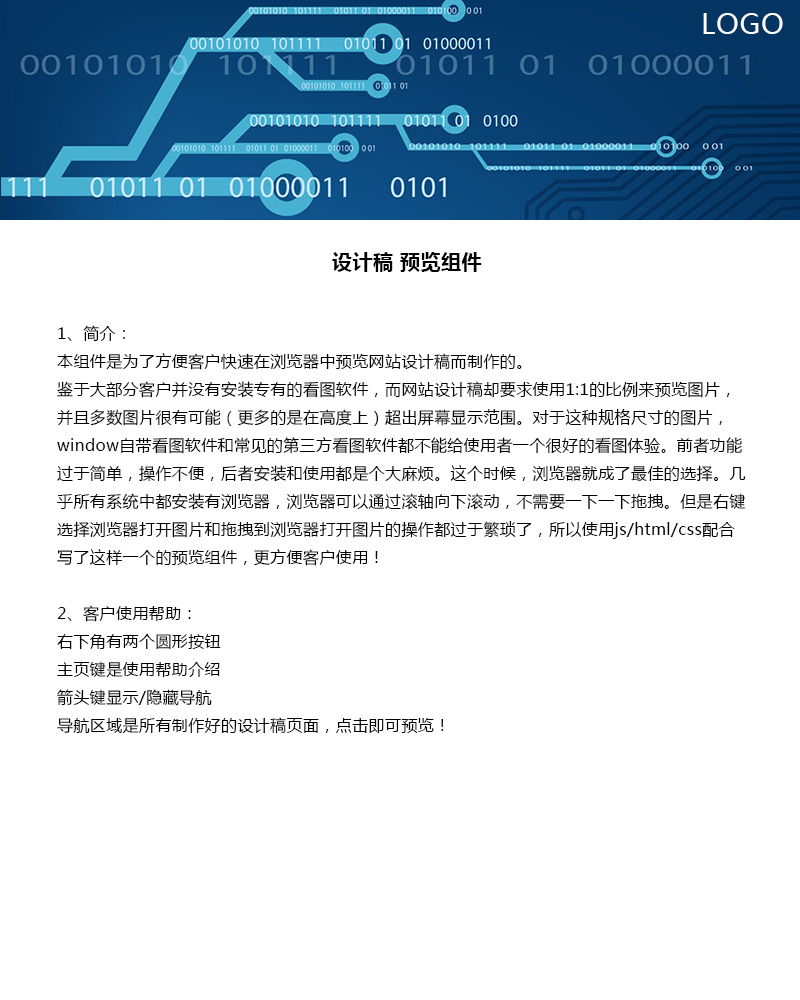
<style>
.page{position:relative;width:800px;height:1000px;background:#ffffff}
.page>*{position:absolute;margin:0}
.t1{font:28px "MicrosoftYaHei";letter-spacing:0.025em;color:#ffffff}
.t2{font:20px "MicrosoftYaHei-Bold";letter-spacing:0.025em;color:#000000}
.t3{font:16px "MicrosoftYaHei";letter-spacing:0.025em;color:#000000}
</style>
<div class="page">
<p class="t1" style="left:703px;top:13px;width:80px;height:21px">LOGO</p>
<p class="t2" style="left:332px;top:252px;width:150px;height:20px">设计稿 预览组件</p>
<p class="t3" style="left:57px;top:325px;width:689px;height:409px">1、简介：<br>本组件是为了方便客户快速在浏览器中预览网站设计稿而制作的。<br>鉴于大部分客户并没有安装专有的看图软件，而网站设计稿却要求使用1:1的比例来预览图片，并且多数图片很有可能（更多的是在高度上）超出屏幕显示范围。对于这种规格尺寸的图片，window自带看图软件和常见的第三方看图软件都不能给使用者一个很好的看图体验。前者功能过于简单，操作不便，后者安装和使用都是个大麻烦。这个时候，浏览器就成了最佳的选择。几乎所有系统中都安装有浏览器，浏览器可以通过滚轴向下滚动，不需要一下一下拖拽。但是右键选择浏览器打开图片和拖拽到浏览器打开图片的操作都过于繁琐了，所以使用js/html/css配合写了这样一个的预览组件，更方便客户使用！<br><br>2、客户使用帮助：<br>右下角有两个圆形按钮<br>主页键是使用帮助介绍<br>箭头键显示/隐藏导航<br>导航区域是所有制作好的设计稿页面，点击即可预览！</p>
</div>
